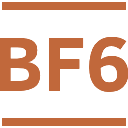
<style>
.page{position:relative;width:128px;height:128px;background:#ffffff}
.page>*{position:absolute;margin:0}
.t1{font:78px "ClearSans-Bold";color:#c1683b}
</style>
<div class="page">
<p class="t1" style="left:0px;top:36px;width:129px;height:56px">BF6</p>
</div>
